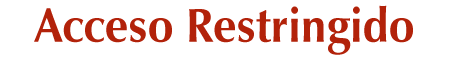
<style>
.page{position:relative;width:450px;height:59px;background:#ffffff}
.page>*{position:absolute;margin:0}
.t1{font:48px "ZapfHumanist601BT-Bold";color:#b2220a;scale:0.95 1}
</style>
<div class="page">
<p class="t1" style="left:34px;top:5px;width:379px;height:50px">Acceso Restringido</p>
</div>
